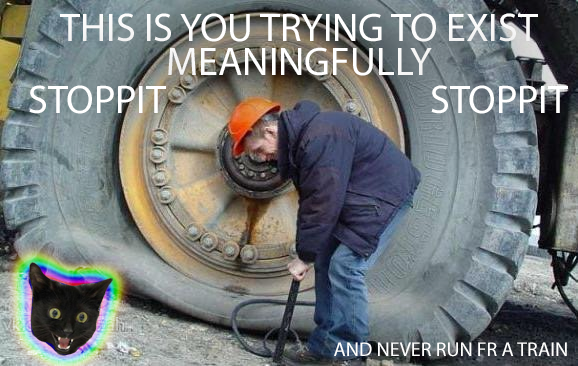
<style>
.page{position:relative;width:578px;height:366px}
.page>*{position:absolute;margin:0}
.t1{font:40px/34px "MyriadPro-Regular";color:#ffffff}
.t2{font:40px "MyriadPro-Regular";color:#ffffff}
.t3{font:20px "MyriadPro-Regular";color:#ffffff}
</style>
<div class="page">
<p class="t1" style="left:60px;top:13px;width:478px;height:63px;text-align:center">THIS IS YOU TRYING TO EXIST <br>MEANINGFULLY</p>
<p class="t2" style="left:29px;top:85px;width:137px;height:29px">STOPPIT</p>
<p class="t2" style="left:431px;top:85px;width:137px;height:29px">STOPPIT</p>
<p class="t3" style="left:334px;top:342px;width:233px;height:15px">AND NEVER RUN FR A TRAIN</p>
</div>
